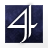
<style>
.page{position:relative;width:48px;height:48px;background:#ffffff}
.page>*{position:absolute;margin:0}
.t1{font:62.4px "ColonnaMT";color:#ffffff}
</style>
<div class="page">
<p class="t1" style="left:7px;top:4px;width:31px;height:39px">4</p>
</div>
